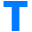
<style>
.page{position:relative;width:32px;height:32px;background:#ffffff}
.page>*{position:absolute;margin:0}
.t1{font:41px "MerriweatherSans-ExtraBold";color:#007bff}
</style>
<div class="page">
<p class="t1" style="left:3px;top:1px;width:25px;height:30px">T</p>
</div>
